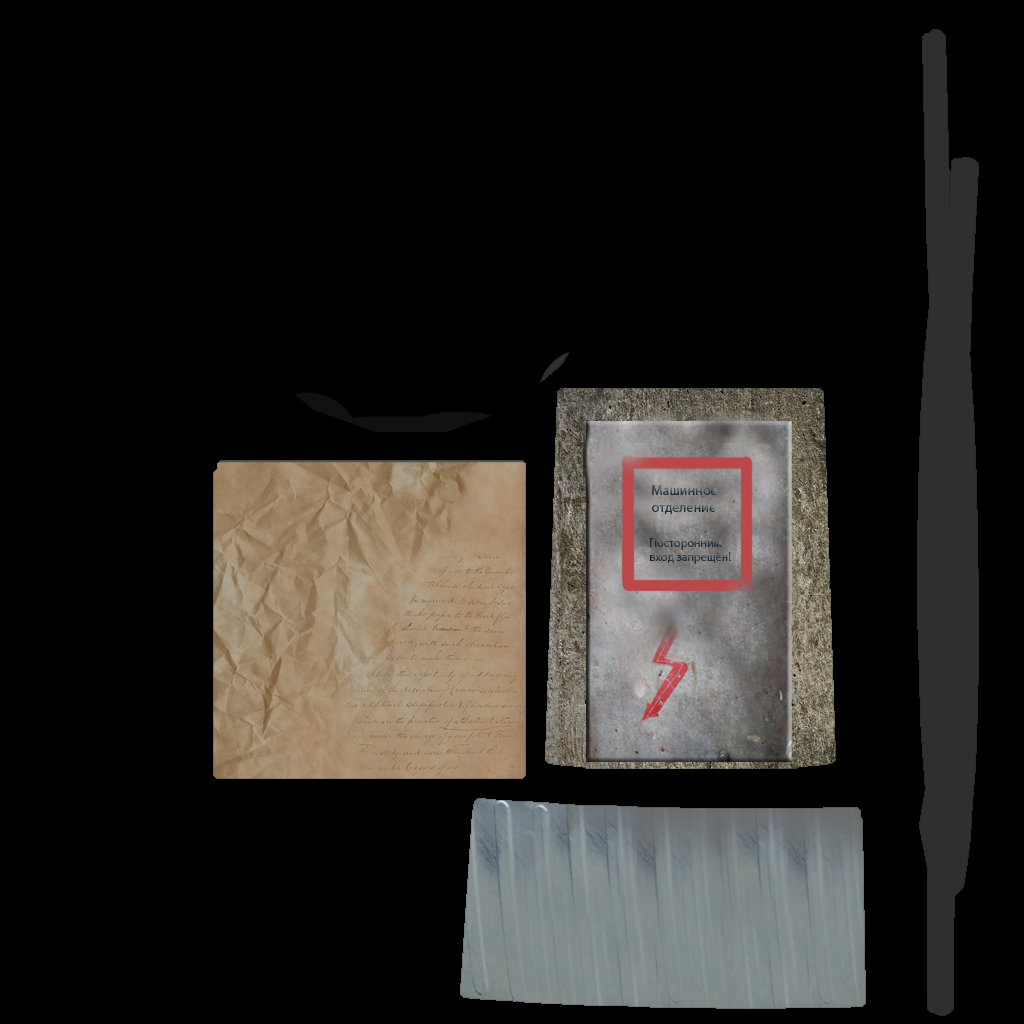
<style>
.page{position:relative;width:1024px;height:1024px;background:#000000}
.page>*{position:absolute;margin:0}
.t1{font:14px "MyriadPro-Regular"}
.t2{font:12px "MyriadPro-Regular";color:#2a363e}
</style>
<div class="page">
<p class="t1" style="left:652px;top:485px;width:65px;height:30px">Машинное отделение</p>
<p class="t2" style="left:650px;top:538px;width:81px;height:26px">Посторонним вход запрещён!</p>
</div>
